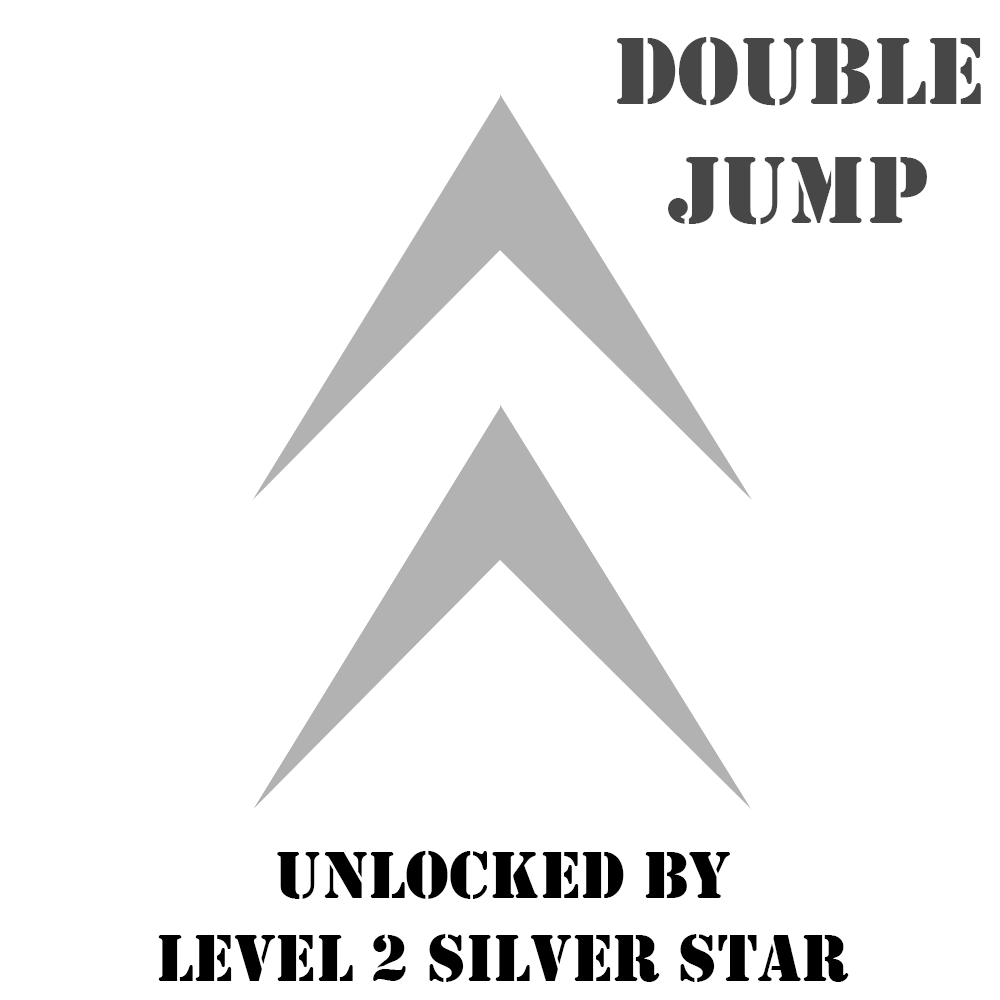
<style>
.page{position:relative;width:1000px;height:1000px;background:#ffffff}
.page>*{position:absolute;margin:0}
.t1{font:98.9px "Stencil";color:#474747}
.t2{font:69.2px "Stencil";color:#000000}
</style>
<div class="page">
<p class="t1" style="left:617px;top:37px;width:364px;height:188px;text-align:center">Double<br>Jump</p>
<p class="t2" style="left:158px;top:850px;width:691px;height:132px;text-align:center">Unlocked By<br>level 2 SILVER Star</p>
</div>
